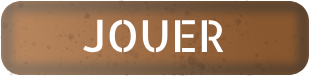
<style>
.page{position:relative;width:310px;height:76px}
.page>*{position:absolute;margin:0}
.t1{font:44px "AllertaStencil-Regular";color:#ffffff}
</style>
<div class="page">
<p class="t1" style="left:83px;top:19px;width:141px;height:34px">JOUER</p>
</div>
